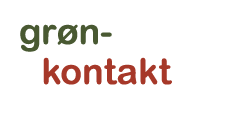
<style>
.page{position:relative;width:250px;height:113px;background:#ffffff}
.page>*{position:absolute;margin:0}
.t1{font:36px "ArialRoundedMTBold";color:#495932}
.t2{font:36px "ArialRoundedMTBold";color:#a63829}
</style>
<div class="page">
<p class="t1" style="left:20px;top:24px;width:92px;height:28px">grøn-</p>
<p class="t2" style="left:43px;top:57px;width:129px;height:28px">kontakt</p>
</div>
